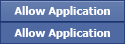
<style>
.page{position:relative;width:125px;height:44px;background:#4f6aa3}
.page>*{position:absolute;margin:0}
.t1{font:11px "Tahoma-Bold";color:#fffeff}
</style>
<div class="page">
<p class="t1" style="left:14px;top:6px;width:96px;height:11px">Allow Application</p>
<p class="t1" style="left:14px;top:28px;width:96px;height:11px">Allow Application</p>
</div>
